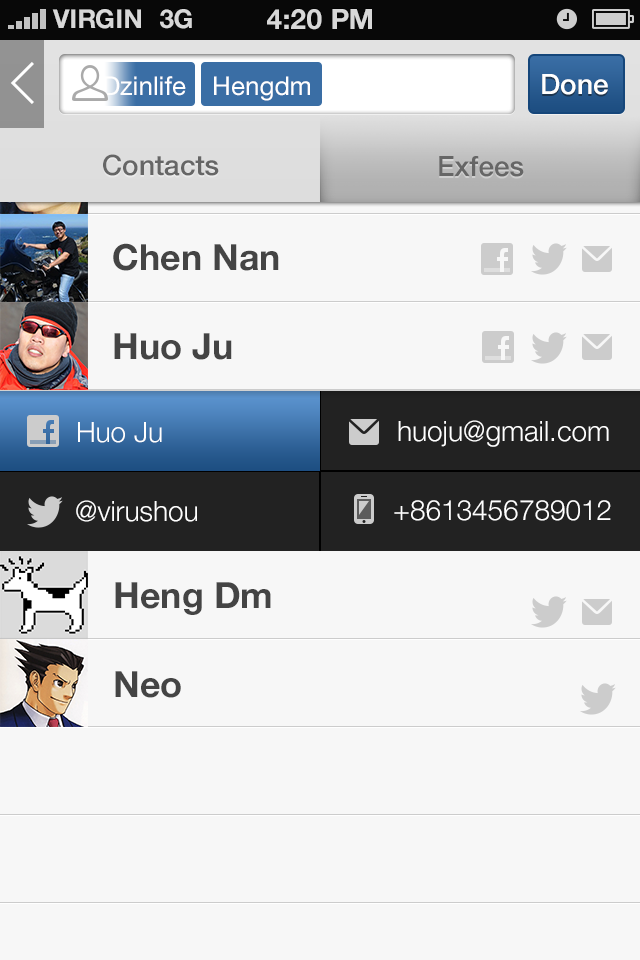
<style>
.page{position:relative;width:640px;height:960px;background:#f7f7f7}
.page>*{position:absolute;margin:0}
.t1{font:26px "HelveticaNeue";color:#ffffff}
.t2{font:28px "HelveticaNeue-Medium";color:#ffffff}
.t3{font:28px "HelveticaNeue-Medium";color:#666666}
.t4{font:36px "HelveticaNeue-Bold";color:#444444}
.t5{font:28px "HelveticaNeue-Light";color:#ffffff}
</style>
<div class="page">
<p class="t1" style="left:104px;top:76px;width:82px;height:20px">Dzinlife</p>
<p class="t1" style="left:214px;top:76px;width:96px;height:25px">Hengdm</p>
<p class="t2" style="left:542px;top:74px;width:66px;height:21px">Done</p>
<p class="t3" style="left:103px;top:154px;width:116px;height:22px">Contacts</p>
<p class="t3" style="left:439px;top:156px;width:85px;height:21px">Exfees</p>
<p class="t4" style="left:113px;top:243px;width:166px;height:28px">Chen Nan</p>
<p class="t4" style="left:114px;top:333px;width:118px;height:27px">Huo Ju</p>
<p class="t5" style="left:78px;top:422px;width:84px;height:21px">Huo Ju</p>
<p class="t5" style="left:398px;top:420px;width:211px;height:27px">huoju@gmail.com</p>
<p class="t5" style="left:76px;top:500px;width:121px;height:22px">@virushou</p>
<p class="t5" style="left:394px;top:500px;width:217px;height:21px">+8613456789012</p>
<p class="t4" style="left:115px;top:582px;width:156px;height:33px">Heng Dm</p>
<p class="t4" style="left:115px;top:671px;width:66px;height:27px">Neo</p>
</div>
